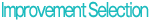
<style>
.page{position:relative;width:154px;height:21px;background:#ffffff}
.page>*{position:absolute;margin:0}
.t1{font:19px "GothicMB101Pro-Medium";letter-spacing:-0.12em;color:#1dbbbe;scale:0.75 1}
</style>
<div class="page">
<p class="t1" style="left:2px;top:1px;width:147px;height:19px">Improvement Selection</p>
</div>
